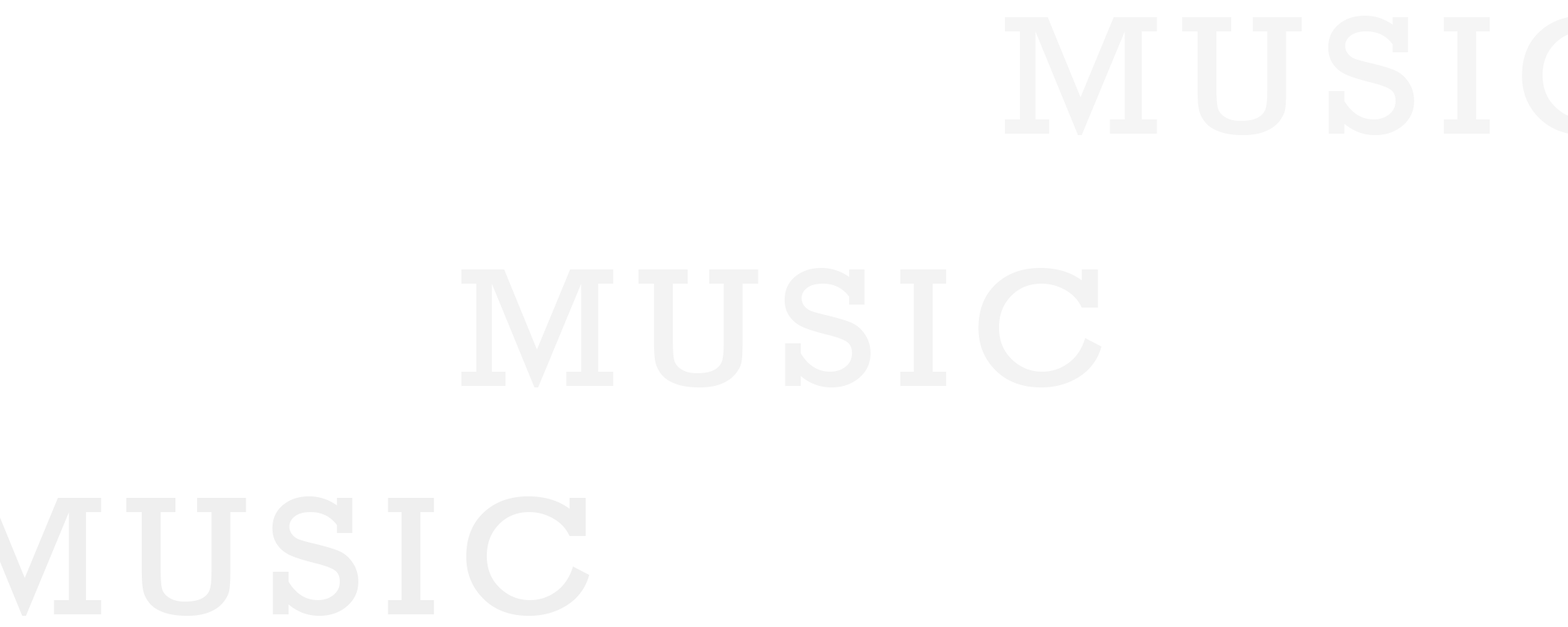
<style>
.page{position:relative;width:1568px;height:627px;background:#ffffff}
.page>*{position:absolute;margin:0}
.t1{font:171.3px "Rockwell";letter-spacing:0.1em;color:#f3f3f3;scale:1.07 1}
</style>
<div class="page">
<p class="t1" style="left:461px;top:268px;width:641px;height:120px">MUSIC</p>
</div>
